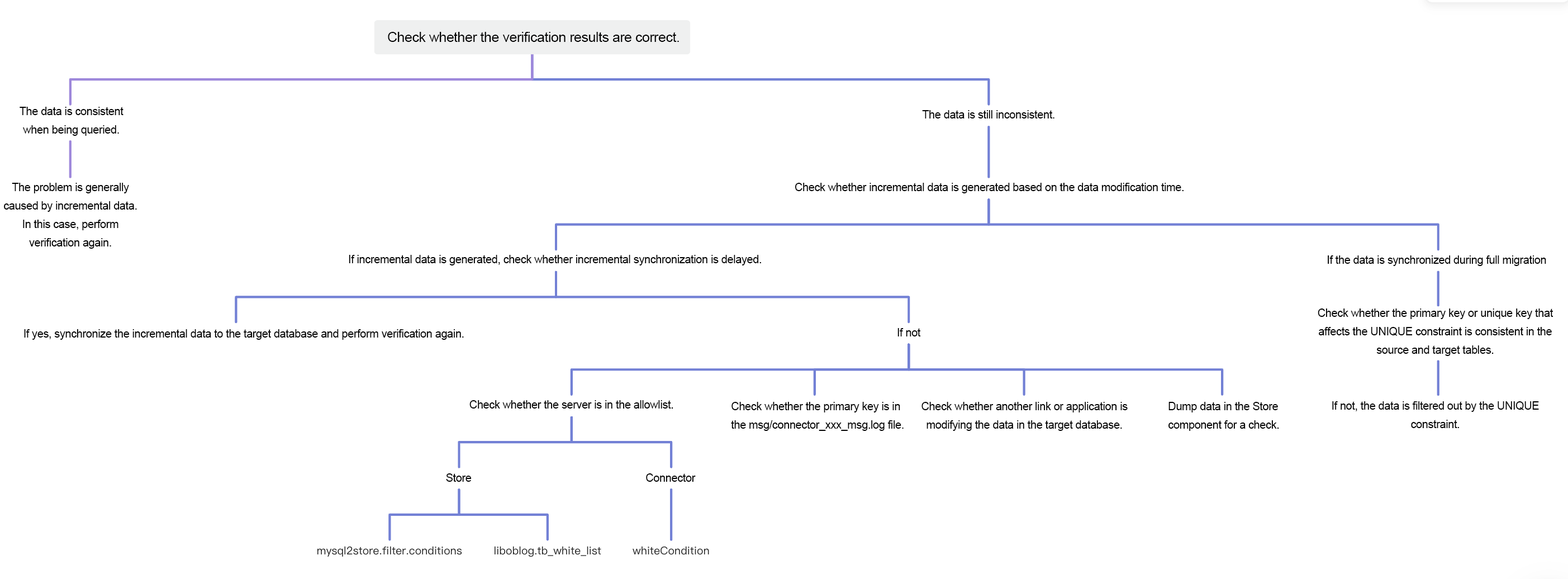
<style>
.page{position:relative;width:1568px;height:579px;background:#ffffff}
.page>*{position:absolute;margin:0}
.t1{font:14px "ArialMT";letter-spacing:-0.02em;color:#000000}
.t2{font:11.2px/18.4px "ArialMT";letter-spacing:-0.02em;color:#000000}
.t3{font:11.2px "ArialMT";letter-spacing:-0.02em;color:#000000}
</style>
<div class="page">
<p class="t1" style="left:388px;top:32px;width:291px;height:10px">Check whether the verification results are correct.</p>
<p class="t2" style="left:20px;top:107px;width:103px;height:29px;text-align:center">The data is consistent when being queried.</p>
<p class="t3" style="left:922px;top:110px;width:132px;height:8px">The data is still inconsistent.</p>
<p class="t2" style="left:4px;top:183px;width:133px;height:66px;text-align:center">The problem is generally caused by incremental data. In this case, perform verification again.</p>
<p class="t3" style="left:795px;top:183px;width:389px;height:10px">Check whether incremental data is generated based on the data modification time.</p>
<p class="t3" style="left:349px;top:255px;width:412px;height:10px">If incremental data is generated, check whether incremental synchronization is delayed.</p>
<p class="t3" style="left:1328px;top:255px;width:218px;height:11px">If the data is synchronized during full migration</p>
<p class="t2" style="left:1318px;top:308px;width:235px;height:48px;text-align:center">Check whether the primary key or unique key that affects the UNIQUE constraint is consistent in the source and target tables.</p>
<p class="t3" style="left:24px;top:329px;width:440px;height:11px">If yes, synchronize the incremental data to the target database and perform verification again.</p>
<p class="t3" style="left:897px;top:328px;width:24px;height:8px">If not</p>
<p class="t3" style="left:469px;top:400px;width:204px;height:8px">Check whether the server is in the allowlist.</p>
<p class="t2" style="left:731px;top:402px;width:173px;height:29px">Check whether the primary key is in the msg/connector_xxx_msg.log file.</p>
<p class="t2" style="left:921px;top:402px;width:207px;height:29px;text-align:center">Check whether another link or application is modifying the data in the target database.</p>
<p class="t2" style="left:1168px;top:402px;width:111px;height:29px">Dump data in the Store component for a check.</p>
<p class="t2" style="left:1332px;top:401px;width:207px;height:27px;text-align:center">If not, the data is filtered out by the UNIQUE constraint.</p>
<p class="t3" style="left:446px;top:473px;width:26px;height:9px">Store</p>
<p class="t3" style="left:646px;top:473px;width:50px;height:9px">Connector</p>
</div>
